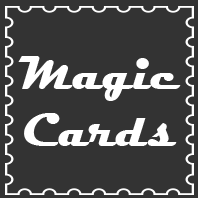
<style>
.page{position:relative;width:198px;height:198px;background:#333333}
.page>*{position:absolute;margin:0}
.t1{font:48px "Magneto-Bold";color:#ffffff}
</style>
<div class="page">
<p class="t1" style="left:18px;top:56px;width:163px;height:90px;text-align:center">Magic<br>Cards</p>
</div>
